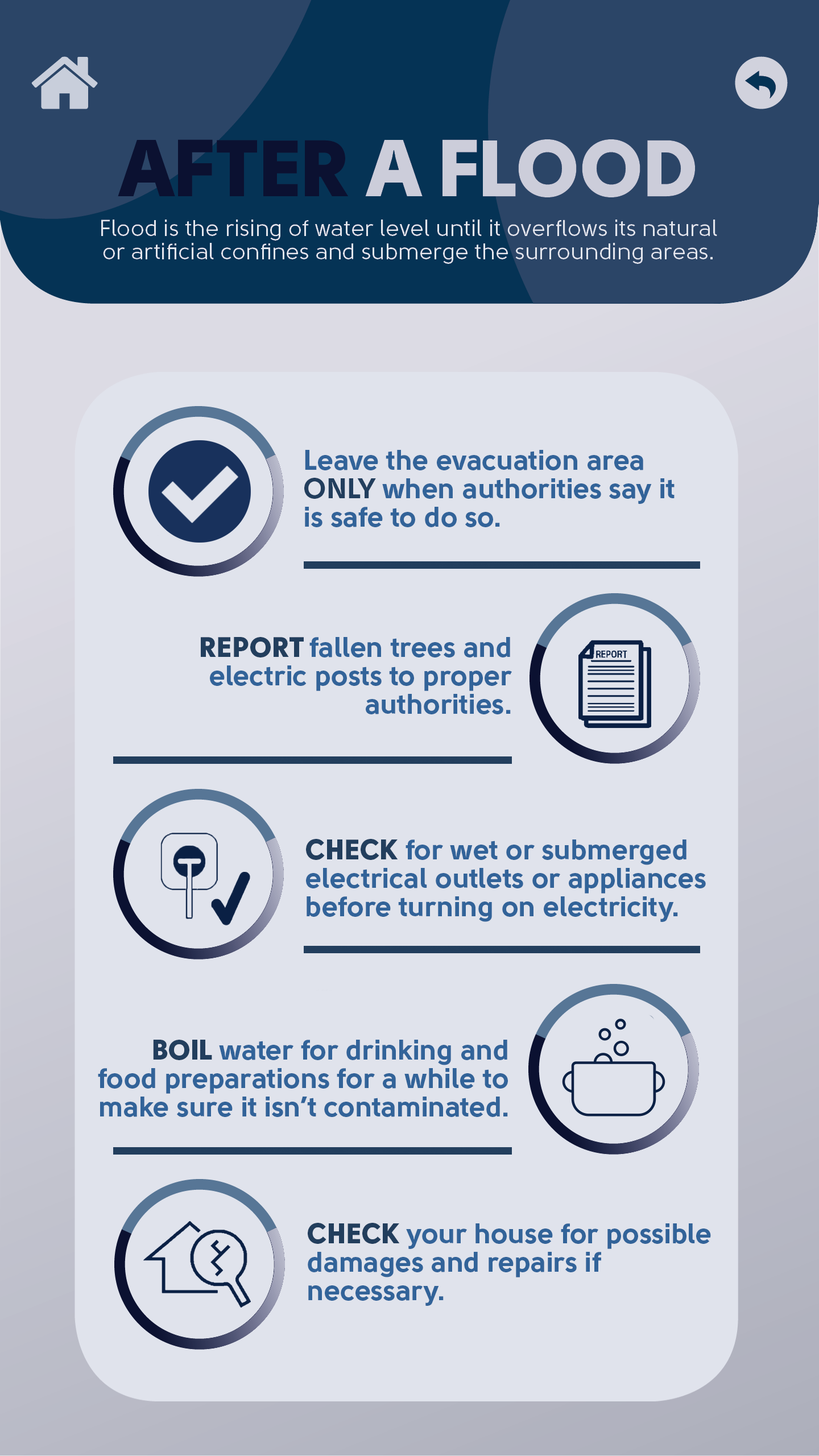
<style>
.page{position:relative;width:819px;height:1456px;background:#e0e3ec}
.page>*{position:absolute;margin:0}
.t1{font:28.4px/28.4px "Solomon-Sans-Bold";color:#326399}
.t2{font:28.4px/28.4px "Solomon-Sans-Bold";color:#223e5d}
.t3{font:28.4px/28.4px "Solomon-Sans-Black";color:#223e5d}
</style>
<div class="page">
<p class="t1" style="left:304px;top:450px;width:371px;height:77px">Leave the evacuation area<br><span class="t2">ONLY </span>when authorities say it<br>is safe to do so.</p>
<p class="t1" style="left:201px;top:637px;width:311px;height:77px;text-align:right"><span class="t3">REPORT </span>fallen trees and<br>electric posts to proper<br>authorities.</p>
<p class="t1" style="left:306px;top:839px;width:400px;height:83px"><span class="t3">CHECK </span>for wet or submerged<br>electrical outlets or appliances<br>before turning on electricity.</p>
<p class="t1" style="left:98px;top:1040px;width:410px;height:77px;text-align:right"><span class="t3">BOIL </span>water for drinking and<br>food preparations for a while to<br>make sure it isn’t contaminated.</p>
<p class="t1" style="left:308px;top:1223px;width:403px;height:83px"><span class="t3">CHECK </span>your house for possible<br>damages and repairs if<br>necessary.</p>
</div>
